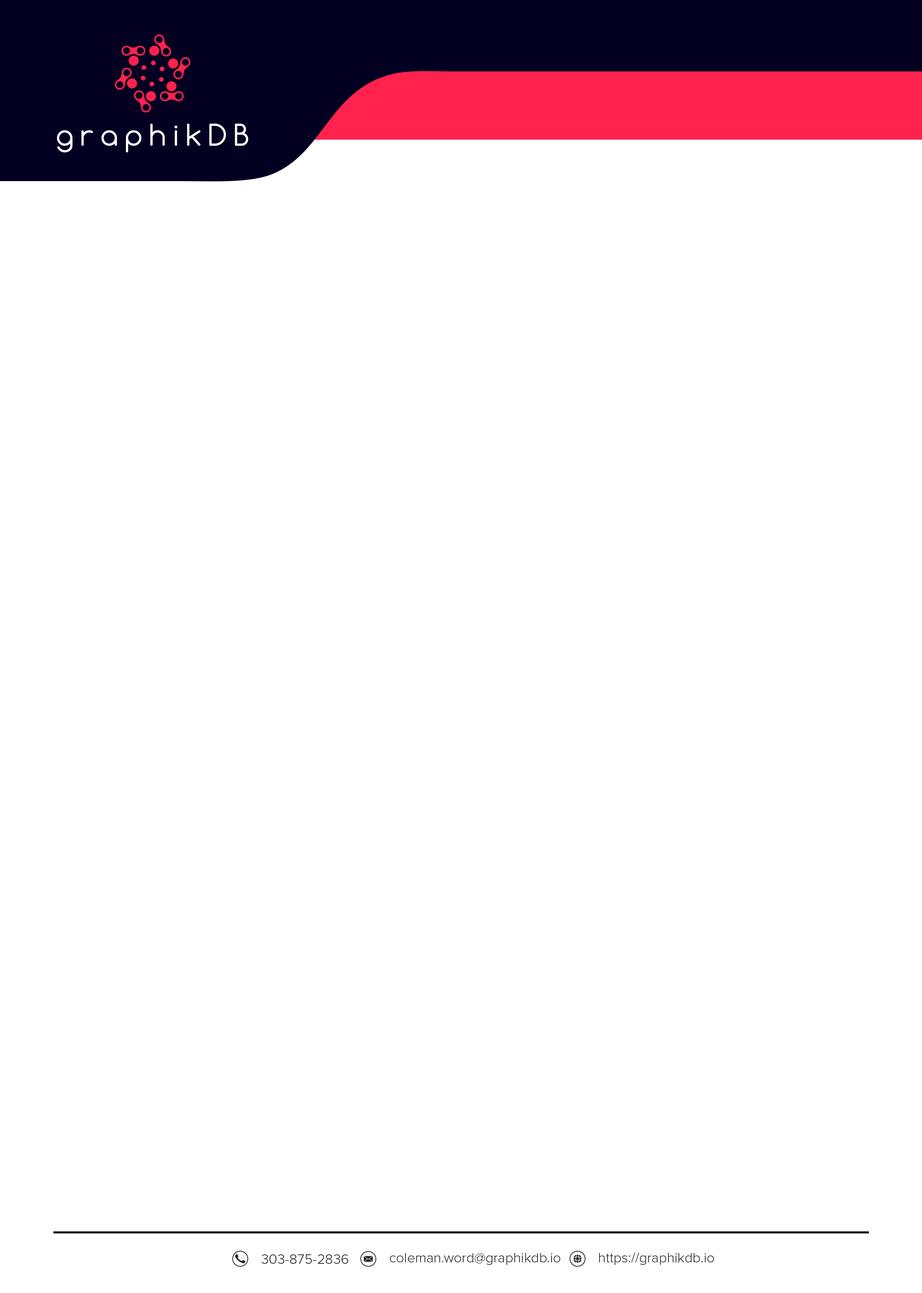
<style>
.page{position:relative;width:922px;height:1293px;background:#ffffff}
.page>*{position:absolute;margin:0}
.t1{font:13.9px "ProximaNova-Light";color:#202020}
</style>
<div class="page">
<p class="t1" style="left:390px;top:1253px;width:170px;height:12px">coleman.word@graphikdb.io</p>
<p class="t1" style="left:599px;top:1253px;width:115px;height:12px">https://graphikdb.io</p>
<p class="t1" style="left:262px;top:1254px;width:87px;height:10px">303-875-2836</p>
</div>
